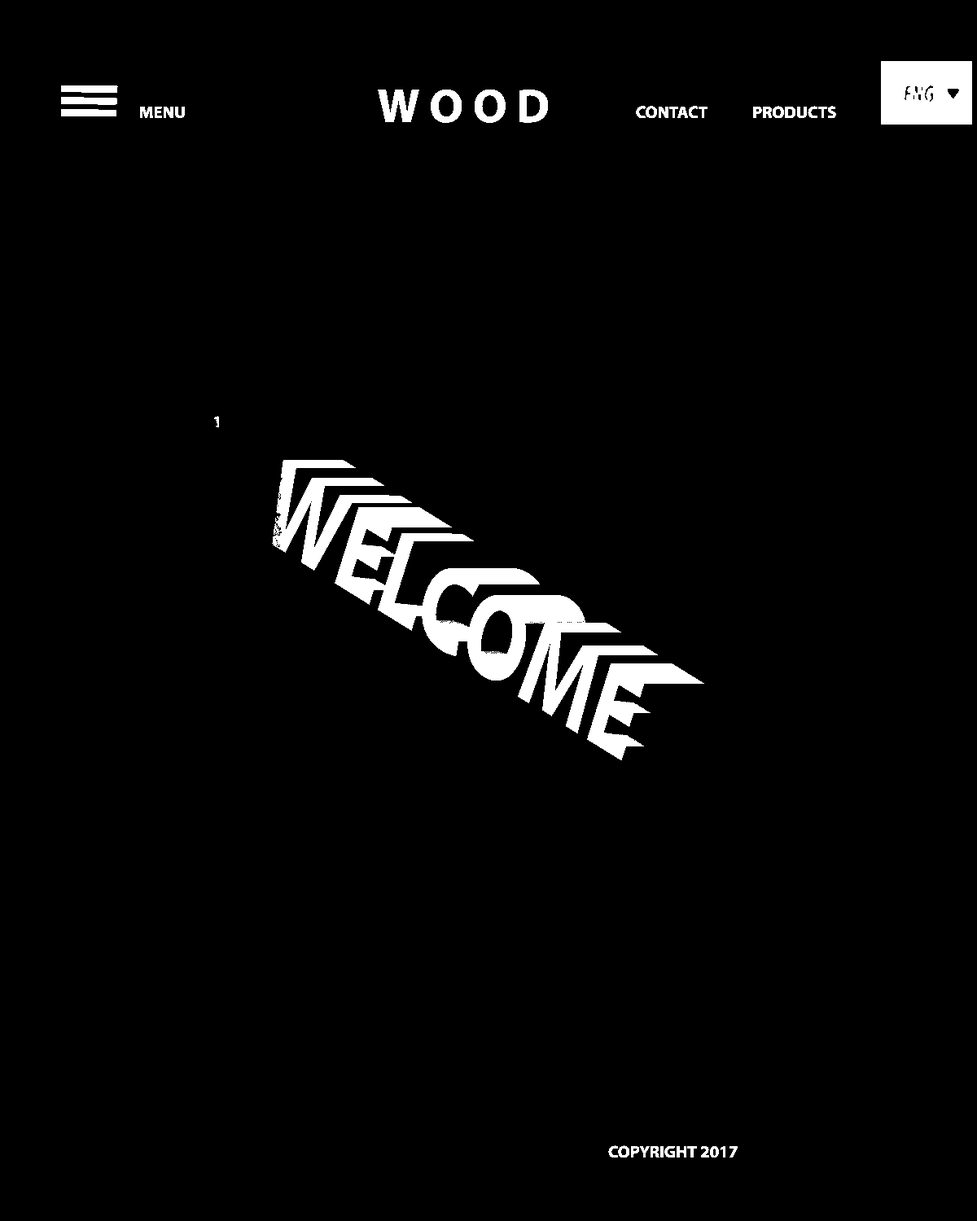
<style>
.page{position:relative;width:977px;height:1221px;background:#000000}
.page>*{position:absolute;margin:0}
.t1{font:47.5px "MyriadPro-Bold";color:#ffffff}
.t2{font:17px "MyriadPro-Bold";color:#ffffff}
</style>
<div class="page">
<p class="t1" style="left:378px;top:90px;width:171px;height:33px">W O O D</p>
<p class="t2" style="left:139px;top:106px;width:46px;height:13px">MENU</p>
<p class="t2" style="left:636px;top:106px;width:71px;height:13px">CONTACT</p>
<p class="t2" style="left:753px;top:106px;width:83px;height:13px">PRODUCTS</p>
<p class="t2" style="left:608px;top:1145px;width:129px;height:13px">COPYRIGHT 2017</p>
</div>
